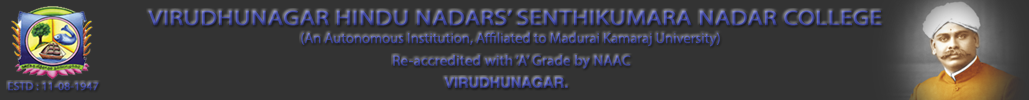
<style>
.page{position:relative;width:1029px;height:100px;background:#333333}
.page>*{position:absolute;margin:0}
.t1{font:21.3px "MyriadPro-Regular";font-weight:bold;scale:1.16 1}
.t2{font:14.6px "MyriadPro-Regular"}
.t3{font:14.6px "MyriadPro-Regular";font-weight:bold}
.t4{font:14.6px "SwitzerlandBold"}
.t5{font:11.5px "MyriadPro-Regular";color:#434ba4;font-weight:bold}
</style>
<div class="page">
<p class="t1" style="left:148px;top:10px;width:734px;height:16px">VIRUDHUNAGAR HINDU NADARS’ SENTHIKUMARA NADAR COLLEGE</p>
<p class="t2" style="left:301px;top:32px;width:419px;height:15px">(An Autonomous Institution, Affiliated to Madurai Kamaraj University)</p>
<p class="t3" style="left:393px;top:55px;width:238px;height:14px">Re-accredited with ‘A’ Grade by NAAC</p>
<p class="t4" style="left:444px;top:77px;width:124px;height:12px">VIRUDHUNAGAR.</p>
<p class="t5" style="left:8px;top:82px;width:91px;height:9px">ESTD : 11-08-1947</p>
</div>
